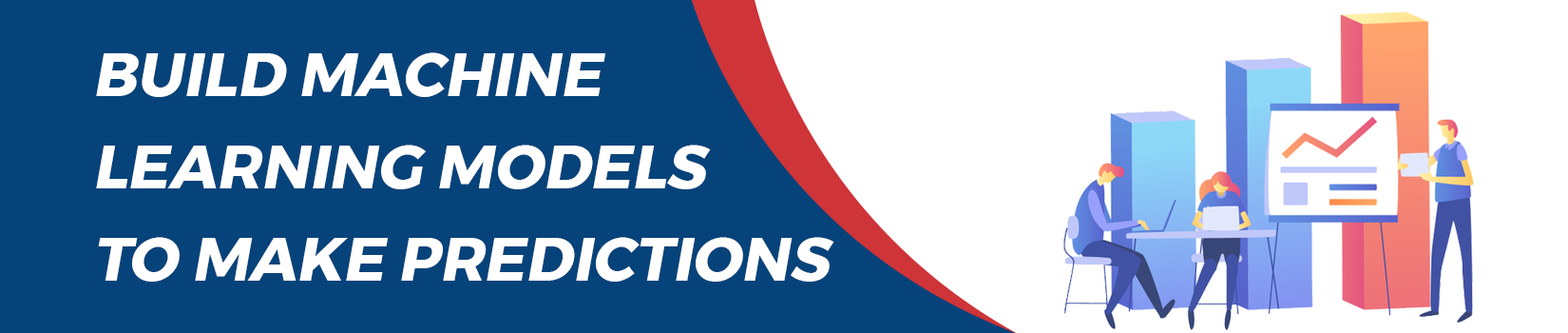
<style>
.page{position:relative;width:1568px;height:333px;background:#06437a}
.page>*{position:absolute;margin:0}
.t1{font:61.4px/92.1px "Montserrat-Bold";color:#ffffff;text-transform:uppercase;font-style:italic}
</style>
<div class="page">
<p class="t1" style="left:96px;top:52px;width:738px;height:229px">BUILD MACHINE<br>LEARNING MODELS <br>TO MAKE PREDICTIONS</p>
</div>
